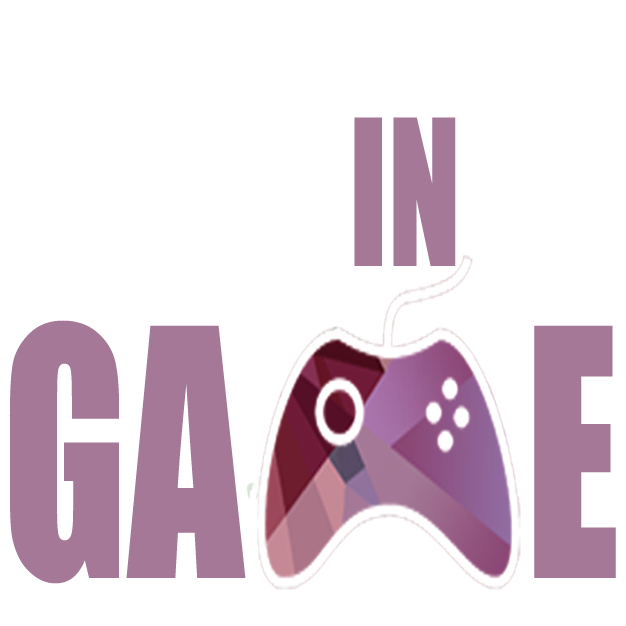
<style>
.page{position:relative;width:626px;height:626px;background:#ffffff}
.page>*{position:absolute;margin:0}
.t1{font:187.5px "Impact";color:#a47896;scale:0.72 1}
.t2{font:318.7px "Impact";color:#a47896;scale:0.72 1}
</style>
<div class="page">
<p class="t1" style="left:354px;top:117px;width:102px;height:149px">IN</p>
<p class="t2" style="left:9px;top:320px;width:607px;height:264px">GA       E</p>
</div>
